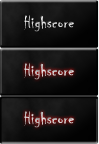
<style>
.page{position:relative;width:99px;height:144px}
.page>*{position:absolute;margin:0}
.t1{font:17.5px "Chiller-Regular";letter-spacing:0.02em}
</style>
<div class="page">
<p class="t1" style="left:24px;top:15px;width:50px;height:17px">Highscore</p>
<p class="t1" style="left:24px;top:63px;width:50px;height:17px">Highscore</p>
<p class="t1" style="left:24px;top:111px;width:50px;height:17px">Highscore</p>
</div>
